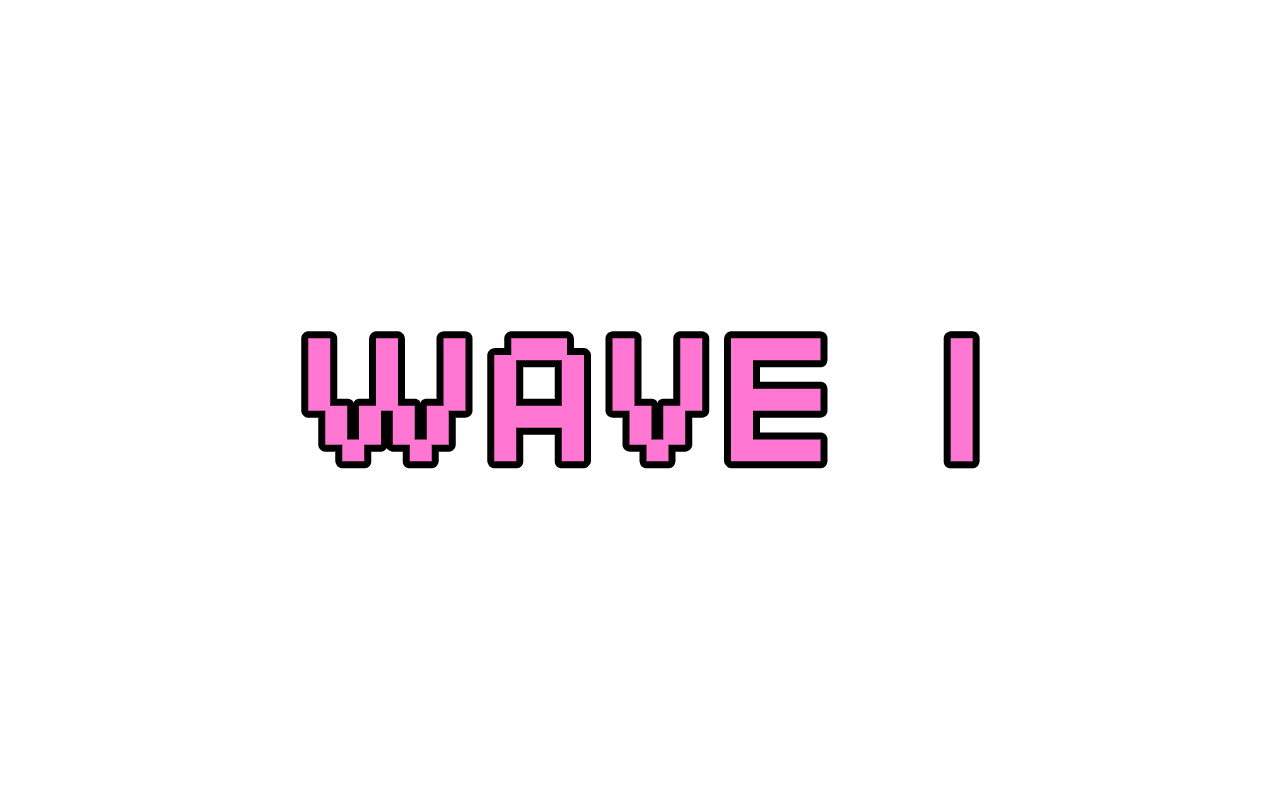
<style>
.page{position:relative;width:1280px;height:800px;background:#ffffff}
.page>*{position:absolute;margin:0}
.t1{font:169px "SFPixelate-Bold";color:#ff77d2}
</style>
<div class="page">
<p class="t1" style="left:308px;top:338px;width:665px;height:124px">WAVE 1</p>
</div>
